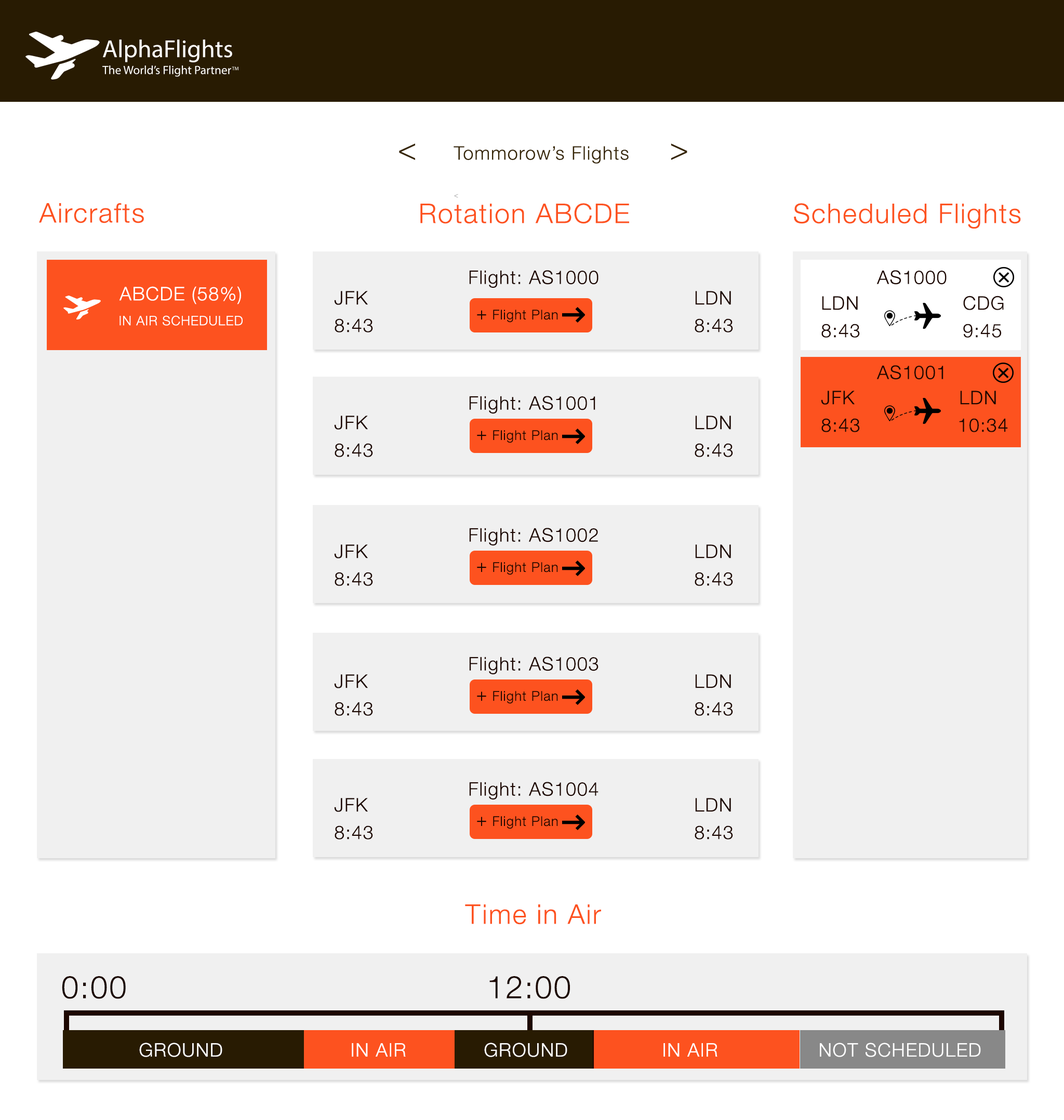
<style>
.page{position:relative;width:1064px;height:1120px;background:#f0f0f0}
.page>*{position:absolute;margin:0}
.t1{font:18.7px "HelveticaNeue-Light";letter-spacing:0.05em;color:#372606}
.t2{font:31.2px "HelveticaNeue-Light";letter-spacing:0.05em;color:#372606}
.t3{font:6.8px "HelveticaNeue-Light";letter-spacing:0.05em;color:#a9a9a9}
.t4{font:27px "HelveticaNeue-Light";letter-spacing:0.05em;color:#fd521f}
.t5{font:18.7px "HelveticaNeue-Light";letter-spacing:0.05em;color:#1d0701}
.t6{font:18.7px "HelveticaNeue-Light";letter-spacing:0.05em;color:#ffffff}
.t7{font:13px "HelveticaNeue-Light";letter-spacing:0.05em;color:#ffffff}
.t8{font:13.4px "HelveticaNeue-Light";letter-spacing:0.05em;color:#1d0701}
.t9{font:17.9px "HelveticaNeue-Light";letter-spacing:0.05em;color:#1d0701}
.t10{font:31.2px "HelveticaNeue-Light";letter-spacing:0.05em;color:#1c0701}
</style>
<div class="page">
<p class="t1" style="left:399px;top:143px;width:289px;height:21px"><span class="t2">&lt;  </span>Tommorow’s Flights<span class="t2">   &gt;</span></p>
<p class="t3" style="left:454px;top:194px;width:4px;height:4px">&lt;</p>
<p class="t4" style="left:39px;top:203px;width:105px;height:20px">Aircrafts</p>
<p class="t4" style="left:420px;top:203px;width:209px;height:21px">Rotation ABCDE</p>
<p class="t4" style="left:794px;top:203px;width:227px;height:26px">Scheduled Flights</p>
<p class="t5" style="left:469px;top:270px;width:130px;height:18px">Flight: AS1000</p>
<p class="t5" style="left:877px;top:270px;width:70px;height:15px">AS1000</p>
<p class="t6" style="left:119px;top:286px;width:122px;height:19px">ABCDE (58%)</p>
<p class="t5" style="left:334px;top:291px;width:34px;height:14px">JFK</p>
<p class="t5" style="left:695px;top:291px;width:36px;height:14px">LDN</p>
<p class="t5" style="left:822px;top:296px;width:36px;height:14px">LDN</p>
<p class="t5" style="left:963px;top:296px;width:41px;height:14px">CDG</p>
<p class="t7" style="left:120px;top:315px;width:123px;height:11px">IN AIR SCHEDULED</p>
<p class="t8" style="left:477px;top:310px;width:81px;height:13px"><span class="t9">+</span> Flight Plan</p>
<p class="t5" style="left:335px;top:319px;width:38px;height:14px">8:43</p>
<p class="t5" style="left:695px;top:319px;width:38px;height:14px">8:43</p>
<p class="t5" style="left:822px;top:324px;width:38px;height:14px">8:43</p>
<p class="t5" style="left:963px;top:324px;width:38px;height:14px">9:45</p>
<p class="t5" style="left:877px;top:365px;width:67px;height:15px">AS1001</p>
<p class="t5" style="left:469px;top:396px;width:127px;height:18px">Flight: AS1001</p>
<p class="t5" style="left:821px;top:391px;width:34px;height:14px">JFK</p>
<p class="t5" style="left:960px;top:391px;width:36px;height:14px">LDN</p>
<p class="t5" style="left:334px;top:416px;width:34px;height:14px">JFK</p>
<p class="t5" style="left:695px;top:416px;width:36px;height:14px">LDN</p>
<p class="t5" style="left:822px;top:418px;width:38px;height:14px">8:43</p>
<p class="t5" style="left:959px;top:418px;width:49px;height:14px">10:34</p>
<p class="t8" style="left:477px;top:430px;width:81px;height:13px"><span class="t9">+</span> Flight Plan</p>
<p class="t5" style="left:335px;top:443px;width:38px;height:14px">8:43</p>
<p class="t5" style="left:695px;top:443px;width:38px;height:14px">8:43</p>
<p class="t5" style="left:469px;top:528px;width:129px;height:18px">Flight: AS1002</p>
<p class="t5" style="left:334px;top:545px;width:34px;height:14px">JFK</p>
<p class="t5" style="left:695px;top:545px;width:36px;height:14px">LDN</p>
<p class="t8" style="left:477px;top:562px;width:81px;height:13px"><span class="t9">+</span> Flight Plan</p>
<p class="t5" style="left:335px;top:572px;width:38px;height:14px">8:43</p>
<p class="t5" style="left:695px;top:572px;width:38px;height:14px">8:43</p>
<p class="t5" style="left:469px;top:657px;width:130px;height:18px">Flight: AS1003</p>
<p class="t5" style="left:334px;top:675px;width:34px;height:14px">JFK</p>
<p class="t5" style="left:695px;top:675px;width:36px;height:14px">LDN</p>
<p class="t8" style="left:477px;top:691px;width:81px;height:13px"><span class="t9">+</span> Flight Plan</p>
<p class="t5" style="left:335px;top:702px;width:38px;height:14px">8:43</p>
<p class="t5" style="left:695px;top:702px;width:38px;height:14px">8:43</p>
<p class="t5" style="left:469px;top:782px;width:130px;height:18px">Flight: AS1004</p>
<p class="t5" style="left:334px;top:798px;width:34px;height:14px">JFK</p>
<p class="t5" style="left:695px;top:798px;width:36px;height:14px">LDN</p>
<p class="t8" style="left:477px;top:816px;width:81px;height:13px"><span class="t9">+</span> Flight Plan</p>
<p class="t5" style="left:335px;top:826px;width:38px;height:14px">8:43</p>
<p class="t5" style="left:695px;top:826px;width:38px;height:14px">8:43</p>
<p class="t4" style="left:465px;top:905px;width:136px;height:20px">Time in Air</p>
<p class="t10" style="left:62px;top:976px;width:64px;height:23px">0:00</p>
<p class="t10" style="left:490px;top:976px;width:80px;height:23px">12:00</p>
<p class="t6" style="left:139px;top:1043px;width:83px;height:15px">GROUND</p>
<p class="t6" style="left:352px;top:1043px;width:54px;height:14px">IN AIR</p>
<p class="t6" style="left:484px;top:1043px;width:83px;height:15px">GROUND</p>
<p class="t6" style="left:664px;top:1043px;width:54px;height:14px">IN AIR</p>
<p class="t6" style="left:820px;top:1043px;width:161px;height:15px">NOT SCHEDULED</p>
</div>
